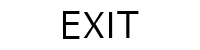
<style>
.page{position:relative;width:200px;height:50px;background:#ffffff}
.page>*{position:absolute;margin:0}
.t1{font:35.4px "NanumBarunGothic";letter-spacing:0.05em;color:#000000}
</style>
<div class="page">
<p class="t1" style="left:63px;top:11px;width:76px;height:28px">EXIT</p>
</div>
